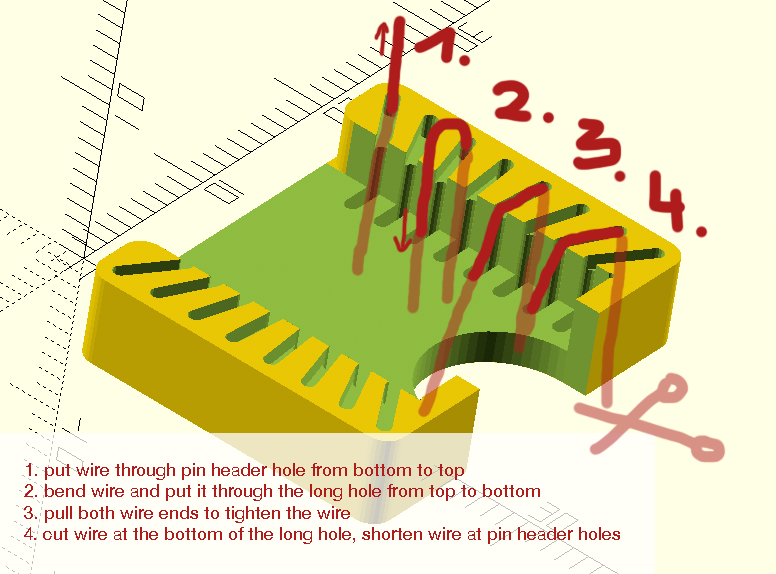
<style>
.page{position:relative;width:776px;height:574px;background:#ffffe5}
.page>*{position:absolute;margin:0}
.t1{font:18px "HelveticaNeue";color:#ae1c1c}
</style>
<div class="page">
<p class="t1" style="left:24px;top:463px;width:596px;height:81px">1. put wire through pin header hole from bottom to top<br>2. bend wire and put it through the long hole from top to bottom<br>3. pull both wire ends to tighten the wire<br>4. cut wire at the bottom of the long hole, shorten wire at pin header holes</p>
</div>
